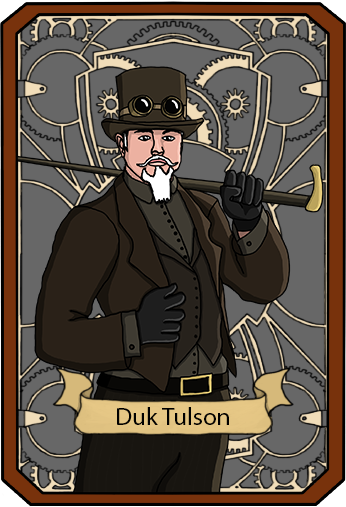
<style>
.page{position:relative;width:346px;height:507px;background:#676767}
.page>*{position:absolute;margin:0}
.t1{font:25px "MyriadPro-Regular";color:#000000}
</style>
<div class="page">
<p class="t1" style="left:117px;top:407px;width:112px;height:18px">Duk Tulson</p>
</div>
